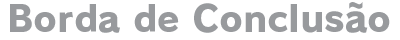
<style>
.page{position:relative;width:400px;height:40px;background:#ffffff}
.page>*{position:absolute;margin:0}
.t1{font:36px "RodinPro-EB";letter-spacing:0.003em;color:#989a9d}
</style>
<div class="page">
<p class="t1" style="left:10px;top:2px;width:380px;height:31px">Borda de Conclusão</p>
</div>
